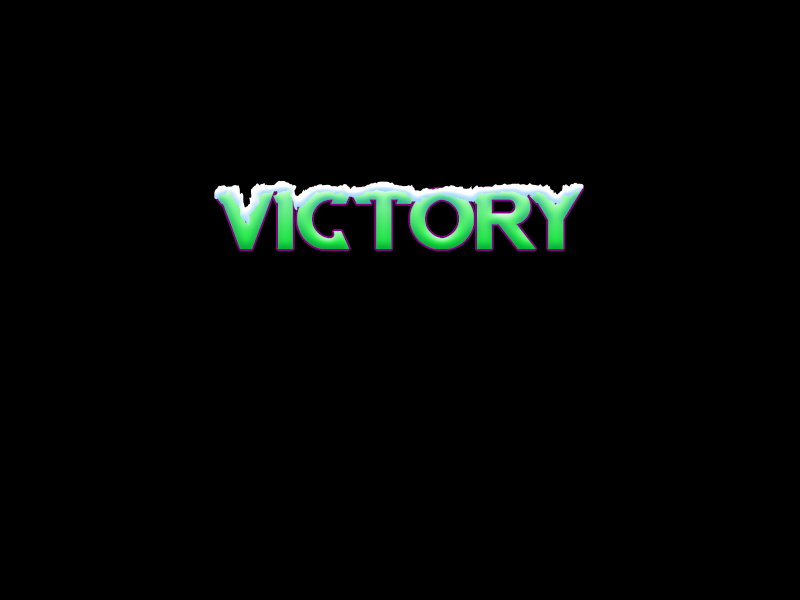
<style>
.page{position:relative;width:800px;height:600px;background:#000000}
.page>*{position:absolute;margin:0}
.t1{font:92.5px "ARCADE"}
</style>
<div class="page">
<p class="t1" style="left:216px;top:188px;width:367px;height:61px">victory</p>
</div>
